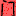
<style>
.page{position:relative;width:16px;height:16px;background:#fd5f5f}
.page>*{position:absolute;margin:0}
.t1{font:18px "DFHanziPenW5-A";color:#010000}
</style>
<div class="page">
<p class="t1" style="left:1px;top:0px;width:14px;height:18px">门</p>
</div>
